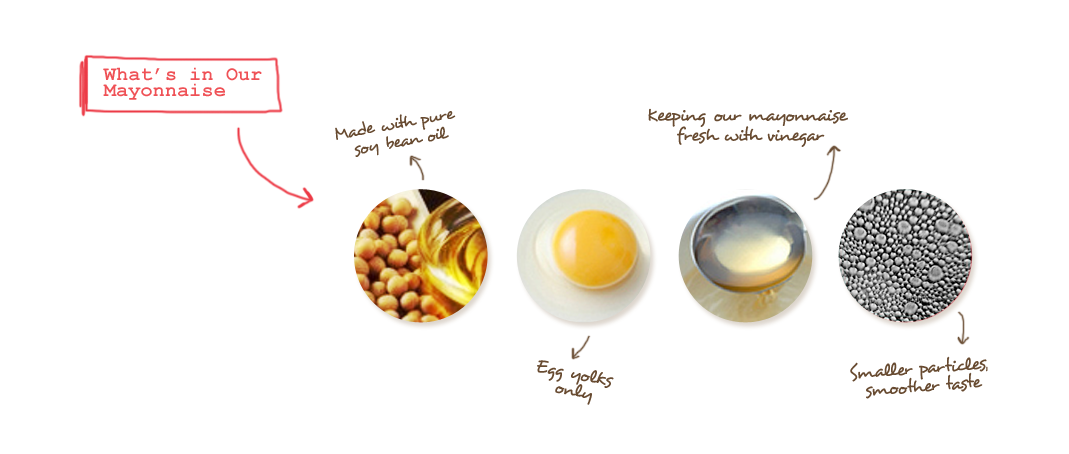
<style>
.page{position:relative;width:1069px;height:454px;background:#ffffff}
.page>*{position:absolute;margin:0}
.t1{font:19.9px/15.9px "CourierNewPS-BoldMT";letter-spacing:0.01em;color:#ef5156}
.t2{font:18px/18px "Desyrel";letter-spacing:0.01em;color:#684b31}
.t3{font:19px/20px "Desyrel";letter-spacing:0.01em;color:#684b31}
.t4{font:19px/17px "Desyrel";letter-spacing:0.01em;color:#684b31}
.t5{font:19px/18px "Desyrel";letter-spacing:0.01em;color:#684b31}
</style>
<div class="page">
<p class="t1" style="left:103px;top:67px;width:159px;height:33px">What’s in Our <br>Mayonnaise</p>
<p class="t2" style="left:335px;top:111px;width:121px;height:46px;text-align:center;rotate:-10deg">Made with pure <br>soy bean oil</p>
<p class="t3" style="left:648px;top:108px;width:200px;height:39px;text-align:center">Keeping our mayonnaise <br>fresh with vinegar</p>
<p class="t4" style="left:537px;top:360px;width:77px;height:45px;text-align:center;rotate:11deg">Egg yolks <br>only</p>
<p class="t5" style="left:850px;top:356px;width:138px;height:43px;text-align:center;rotate:-4deg">Smaller particles, <br>smoother taste</p>
</div>
